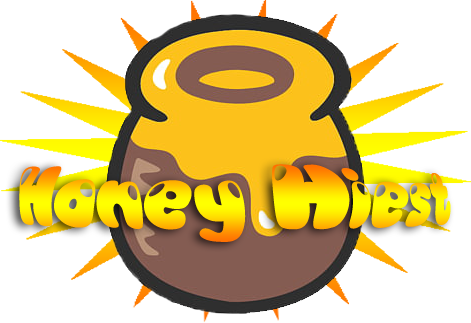
<style>
.page{position:relative;width:471px;height:323px;background:#ffffff}
.page>*{position:absolute;margin:0}
.t1{font:72px "Candyshop-Regular"}
</style>
<div class="page">
<p class="t1" style="left:19px;top:164px;width:432px;height:78px">Honey Hiest</p>
</div>
